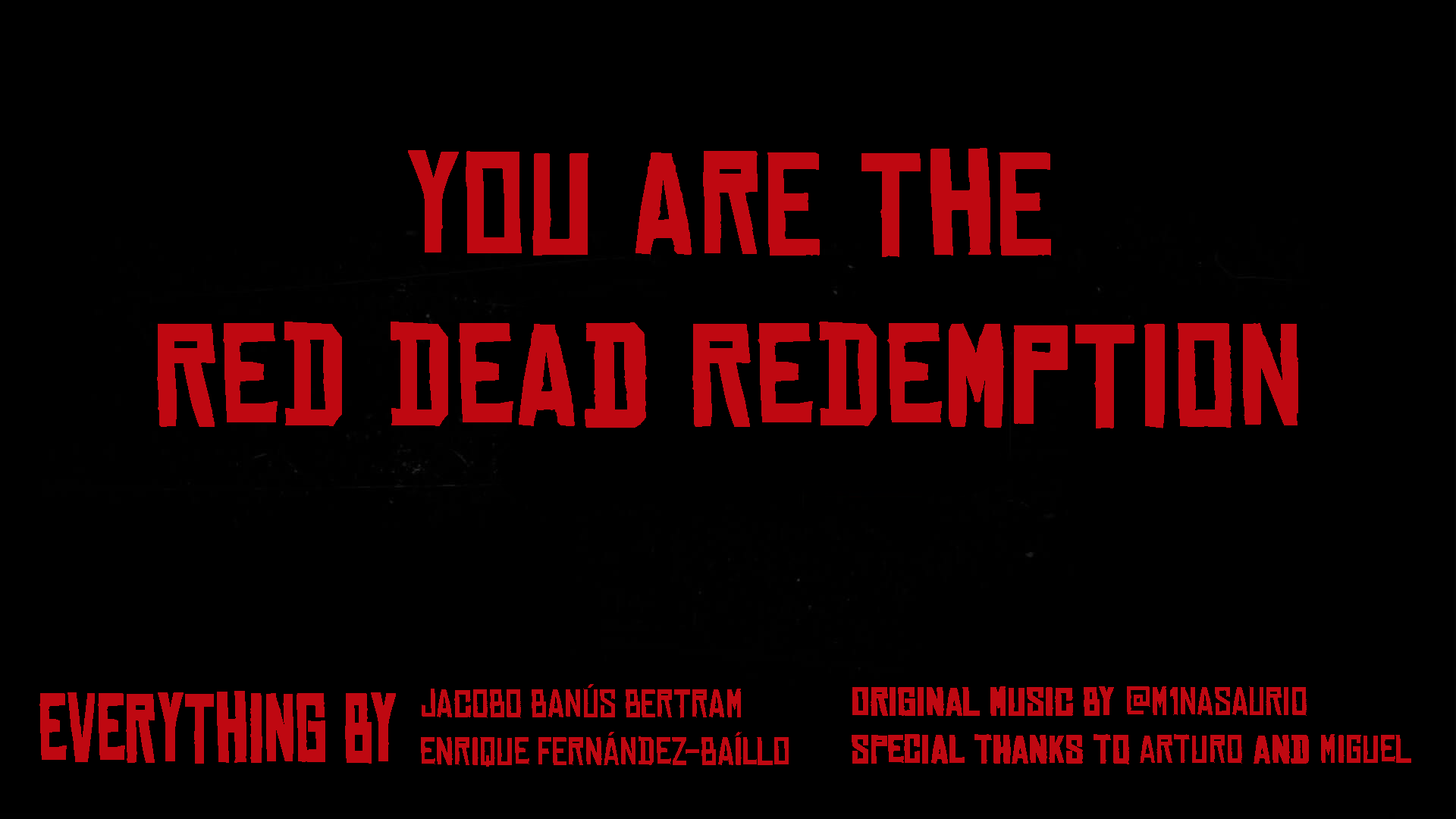
<style>
.page{position:relative;width:1456px;height:819px;background:#000000}
.page>*{position:absolute;margin:0}
.t1{font:136.9px/120.2px "ChineseRocksRg-Regular";color:#bf0811;font-weight:bold}
.t2{font:37.7px/33.1px "ChineseRocksRg-Regular";color:#bf0811}
.t3{font:37.7px/33.1px "ChineseRocksRg-Regular";color:#bf0811;font-weight:bold}
.t4{font:91.6px "ChineseRocksRg-Regular";color:#bf0811;font-weight:bold;scale:0.7 1}
</style>
<div class="page">
<p class="t1" style="left:157px;top:148px;width:1141px;height:280px;text-align:center">YOU ARE THE<br>RED DEAD REDEMPTION</p>
<p class="t2" style="left:421px;top:684px;width:368px;height:83px">jacobo banús bertram<br>enrique fernández-baíllo</p>
<p class="t3" style="left:852px;top:686px;width:559px;height:78px">original music by <span class="t2">@m1nasaurio<br></span>special thanks to <span class="t2">arturo</span> and <span class="t2">miguel</span></p>
<p class="t4" style="left:39px;top:691px;width:357px;height:73px">everything by</p>
</div>
